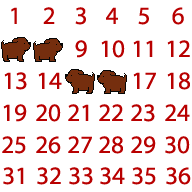
<style>
.page{position:relative;width:192px;height:192px;background:#ffffff}
.page>*{position:absolute;margin:0}
.t1{font:25px "MyriadPro-Regular";color:#b80000}
</style>
<div class="page">
<p class="t1" style="left:11px;top:7px;width:6px;height:17px">1</p>
<p class="t1" style="left:43px;top:7px;width:12px;height:17px">2</p>
<p class="t1" style="left:75px;top:7px;width:11px;height:18px">3</p>
<p class="t1" style="left:106px;top:7px;width:12px;height:17px">4</p>
<p class="t1" style="left:138px;top:7px;width:11px;height:18px">5</p>
<p class="t1" style="left:172px;top:7px;width:12px;height:18px">6</p>
<p class="t1" style="left:75px;top:40px;width:12px;height:18px">9</p>
<p class="t1" style="left:101px;top:40px;width:24px;height:18px">10</p>
<p class="t1" style="left:133px;top:40px;width:20px;height:17px">11</p>
<p class="t1" style="left:167px;top:40px;width:23px;height:17px">12</p>
<p class="t1" style="left:4px;top:72px;width:23px;height:18px">13</p>
<p class="t1" style="left:38px;top:72px;width:24px;height:17px">14</p>
<p class="t1" style="left:133px;top:72px;width:23px;height:17px">17</p>
<p class="t1" style="left:167px;top:72px;width:23px;height:18px">18</p>
<p class="t1" style="left:3px;top:104px;width:24px;height:18px">19</p>
<p class="t1" style="left:36px;top:104px;width:25px;height:18px">20</p>
<p class="t1" style="left:68px;top:104px;width:21px;height:17px">21</p>
<p class="t1" style="left:99px;top:104px;width:24px;height:17px">22</p>
<p class="t1" style="left:131px;top:104px;width:24px;height:18px">23</p>
<p class="t1" style="left:165px;top:104px;width:25px;height:17px">24</p>
<p class="t1" style="left:2px;top:136px;width:24px;height:18px">25</p>
<p class="t1" style="left:36px;top:136px;width:25px;height:18px">26</p>
<p class="t1" style="left:68px;top:136px;width:24px;height:17px">27</p>
<p class="t1" style="left:99px;top:136px;width:24px;height:18px">28</p>
<p class="t1" style="left:131px;top:136px;width:25px;height:18px">29</p>
<p class="t1" style="left:165px;top:136px;width:25px;height:18px">30</p>
<p class="t1" style="left:3px;top:167px;width:21px;height:18px">31</p>
<p class="t1" style="left:37px;top:167px;width:24px;height:18px">32</p>
<p class="t1" style="left:69px;top:167px;width:24px;height:18px">33</p>
<p class="t1" style="left:100px;top:167px;width:25px;height:18px">34</p>
<p class="t1" style="left:132px;top:167px;width:24px;height:18px">35</p>
<p class="t1" style="left:166px;top:167px;width:25px;height:18px">36</p>
</div>
